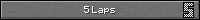
<style>
.page{position:relative;width:200px;height:20px;background:#6f6f6f}
.page>*{position:absolute;margin:0}
.t1{font:8px "Minecraft";color:#ffffff}
</style>
<div class="page">
<p class="t1" style="left:84px;top:6px;width:31px;height:8px">5 Laps</p>
</div>
